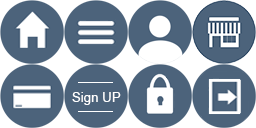
<style>
.page{position:relative;width:256px;height:128px;background:#4c637b}
.page>*{position:absolute;margin:0}
.t1{font:13.3px "ArialMT";color:#ffffff}
</style>
<div class="page">
<p class="t1" style="left:72px;top:92px;width:49px;height:13px">Sign UP</p>
</div>
